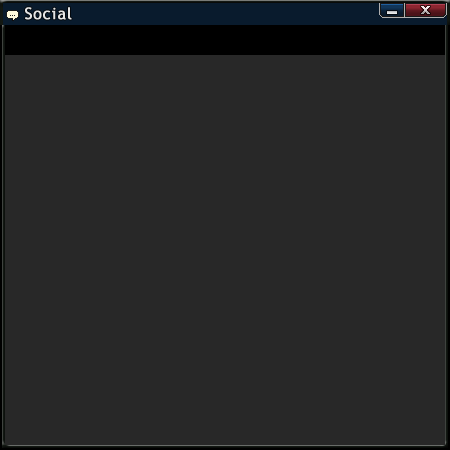
<style>
.page{position:relative;width:450px;height:450px;background:#282828}
.page>*{position:absolute;margin:0}
.t1{font:16px "TrebuchetMS";letter-spacing:0.04em;color:#e5e5e5;font-weight:bold}
</style>
<div class="page">
<p class="t1" style="left:25px;top:7px;width:47px;height:13px">Social</p>
</div>
